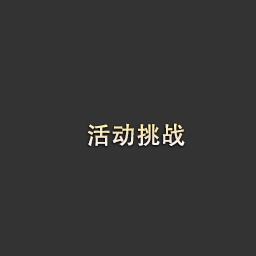
<style>
.page{position:relative;width:256px;height:256px;background:#333333}
.page>*{position:absolute;margin:0}
.t1{font:24px "AdobeHeitiStd-Regular";letter-spacing:0.04em;text-transform:uppercase}
</style>
<div class="page">
<p class="t1" style="left:87px;top:123px;width:98px;height:23px">活动挑战</p>
</div>
